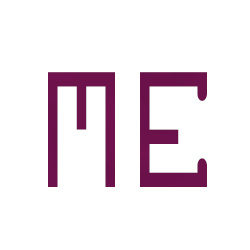
<style>
.page{position:relative;width:250px;height:250px;background:#ffffff}
.page>*{position:absolute;margin:0}
.t1{font:229.7px "SciFi-of-the-past";letter-spacing:0.1em;color:#6e124c;scale:0.67 1}
</style>
<div class="page">
<p class="t1" style="left:48px;top:72px;width:159px;height:115px">ME</p>
</div>
